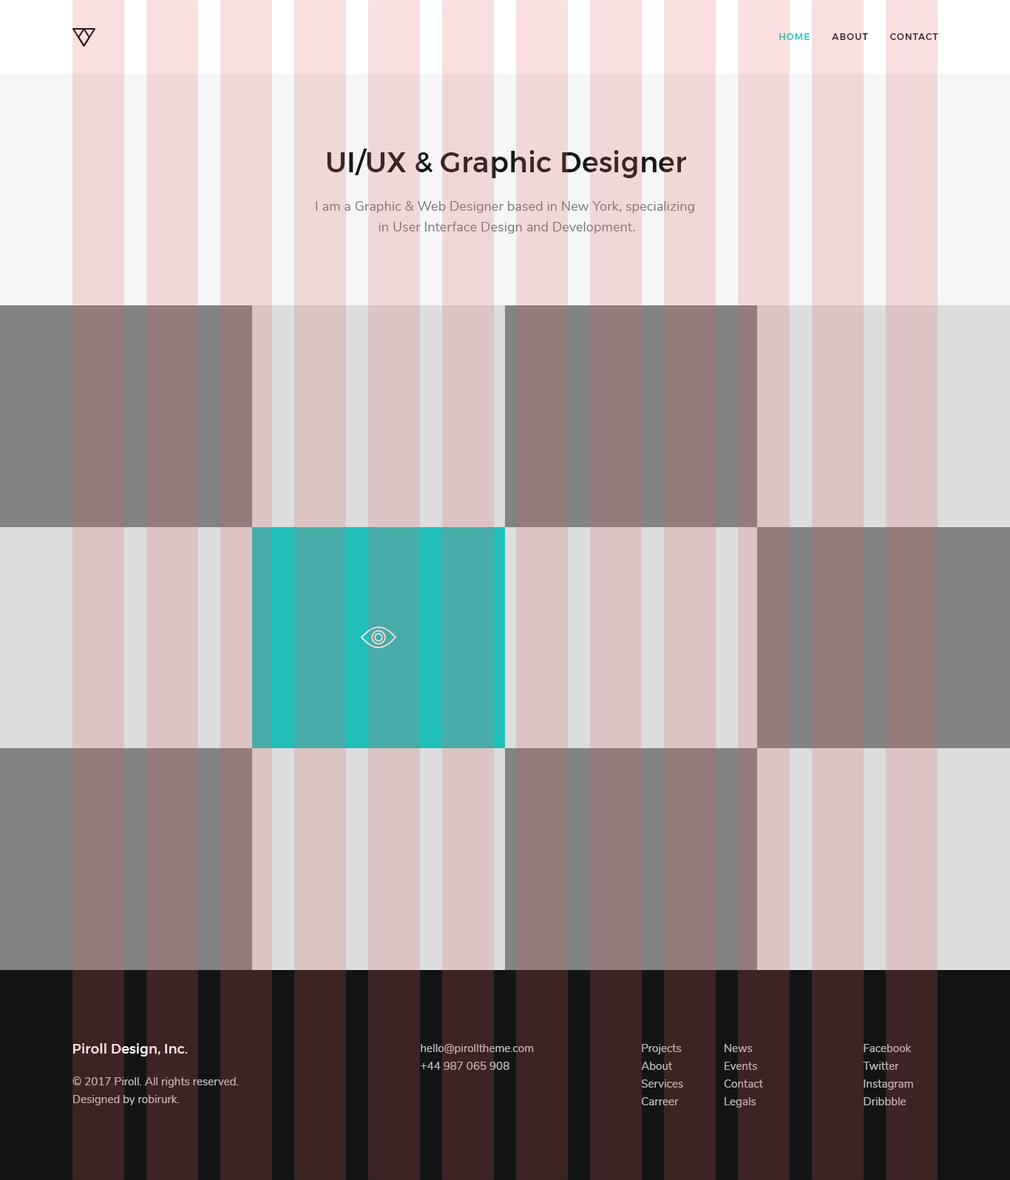
<style>
.page{position:relative;width:1010px;height:1180px}
.page>*{position:absolute;margin:0}
.t1{font:8.9px "Montserrat-Medium";letter-spacing:0.1em;color:#412727;text-transform:uppercase}
.t2{font:28.1px "Montserrat-Medium";letter-spacing:0.01em}
.t3{font:13.3px/20.7px "NunitoSans-Regular";letter-spacing:0.005em;color:#787878}
.t4{font:13.3px "Montserrat-Medium";letter-spacing:0.01em;color:#f9dfdf}
.t5{font:11.1px/17.7px "NunitoSans-Regular";letter-spacing:0.005em;color:#bcbcbc}
</style>
<div class="page">
<p class="t1" style="left:779px;top:33px;width:160px;height:7px">home       about       contact</p>
<p class="t2" style="left:327px;top:149px;width:359px;height:29px">UI/UX &amp; Graphic Designer</p>
<p class="t3" style="left:316px;top:201px;width:378px;height:33px;text-align:center">I am a Graphic &amp; Web Designer based in New York, specializing <br>in User Interface Design and Development.</p>
<p class="t4" style="left:73px;top:1044px;width:115px;height:13px">Piroll Design, Inc.</p>
<p class="t5" style="left:421px;top:1044px;width:113px;height:26px">hello@pirolltheme.com<br>+44 987 065 908</p>
<p class="t5" style="left:641px;top:1044px;width:42px;height:62px">Projects<br>About<br>Services<br>Carreer</p>
<p class="t5" style="left:724px;top:1044px;width:39px;height:64px">News<br>Events<br>Contact<br>Legals</p>
<p class="t5" style="left:863px;top:1044px;width:50px;height:62px">Facebook<br>Twitter<br>Instagram<br>Dribbble</p>
<p class="t5" style="left:72px;top:1077px;width:167px;height:29px">© 2017 Piroll. All rights reserved.<br>Designed by robirurk.</p>
</div>
